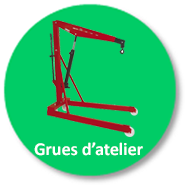
<style>
.page{position:relative;width:185px;height:185px;background:#00cc66}
.page>*{position:absolute;margin:0}
.t1{font:18px "Calibri-Bold";color:#ffffff}
</style>
<div class="page">
<p class="t1" style="left:34px;top:142px;width:109px;height:14px">Grues d’atelier</p>
</div>
